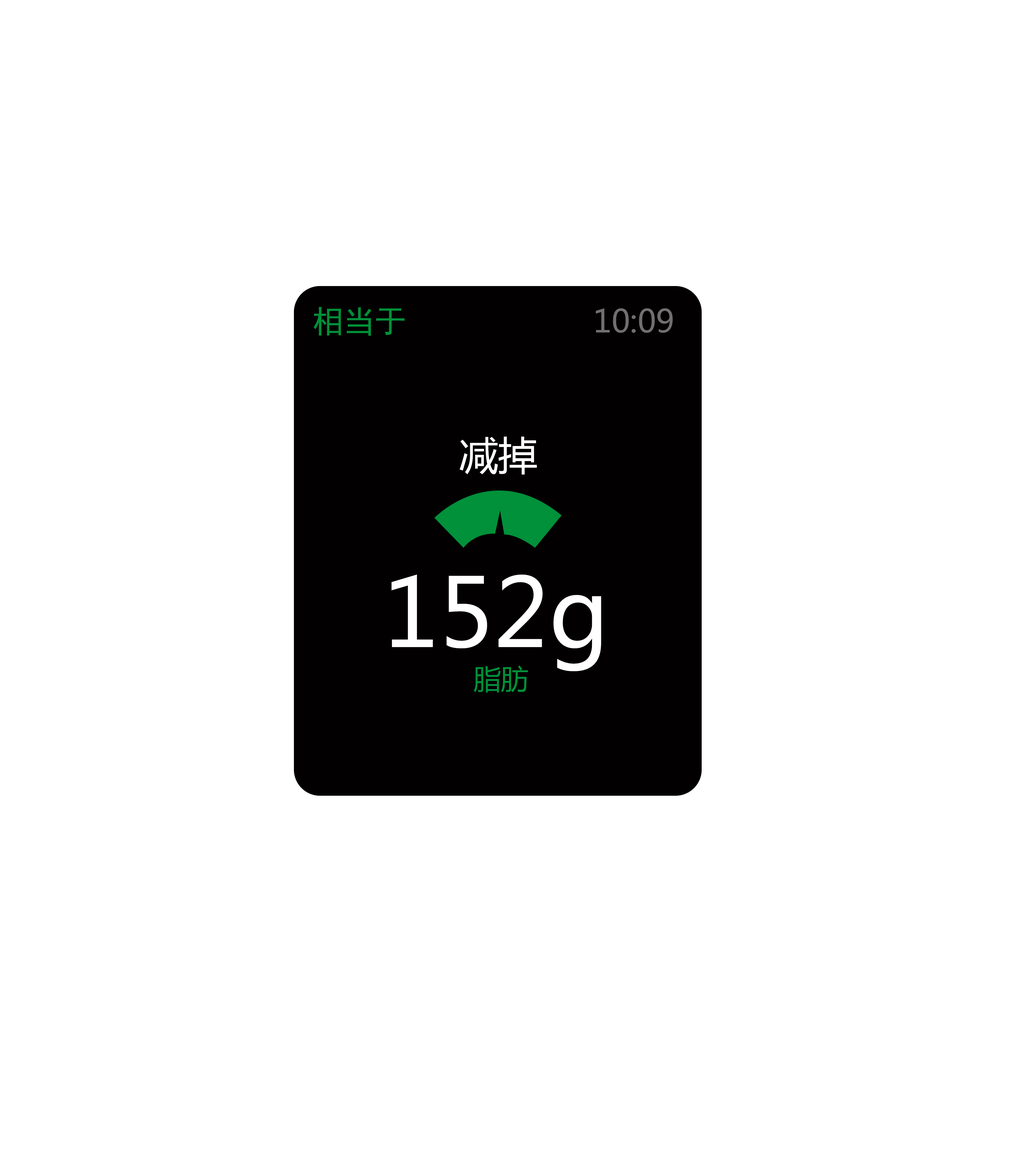
<style>
.page{position:relative;width:1026px;height:1163px;background:#ffffff}
.page>*{position:absolute;margin:0}
.t1{font:31.4px "SimHei";color:#00913a}
.t2{font:31.4px "MicrosoftYaHei";color:#717071}
.t3{font:39.2px "MicrosoftYaHei";color:#ffffff}
.t4{font:94.1px "MicrosoftYaHei";color:#ffffff}
.t5{font:27.4px "MicrosoftYaHei";color:#00913a}
</style>
<div class="page">
<p class="t1" style="left:313px;top:307px;width:91px;height:29px">相当于</p>
<p class="t2" style="left:595px;top:308px;width:78px;height:25px">10:09</p>
<p class="t3" style="left:459px;top:436px;width:78px;height:38px">减掉</p>
<p class="t4" style="left:391px;top:574px;width:210px;height:97px">152g</p>
<p class="t5" style="left:473px;top:665px;width:55px;height:27px">脂肪</p>
</div>
